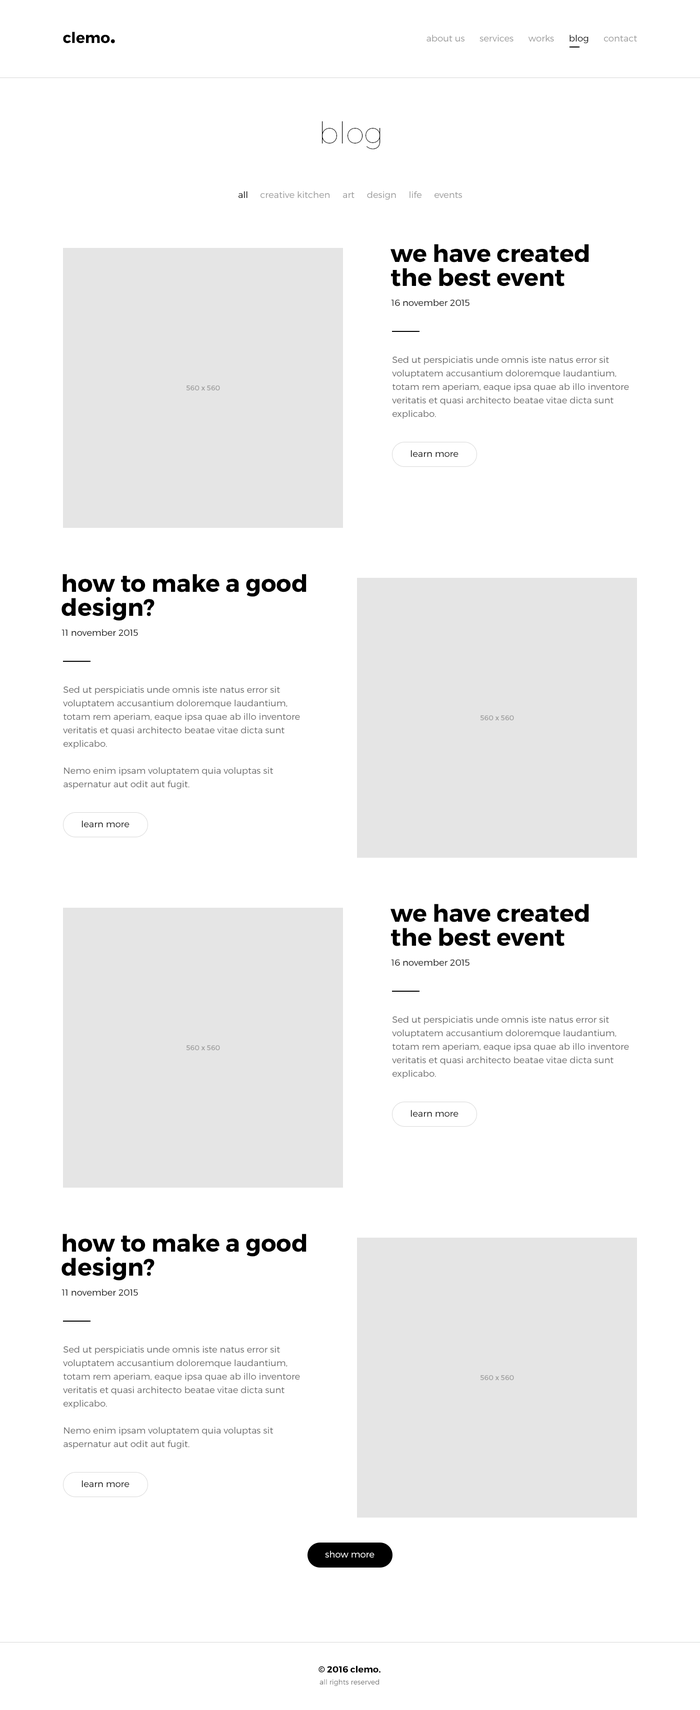
<style>
.page{position:relative;width:700px;height:1710px;background:#ffffff}
.page>*{position:absolute;margin:0}
.t1{font:15px "Montserrat-Bold";color:#000000}
.t2{font:24px "Montserrat-Bold";color:#000000}
.t3{font:9px "Montserrat-Light";color:#989898}
.t4{font:9px "Montserrat-Light";color:#000000}
.t5{font:30px "Montserrat-Hairline";color:#000000}
.t6{font:24px/24px "Montserrat-Bold";color:#000000}
.t7{font:9px/13.5px "Montserrat-Light";color:#656565}
.t8{font:7px "Montserrat-Regular";color:#9a9a9a}
.t9{font:9px "Montserrat-Light";color:#ffffff}
.t10{font:7px/12px "Montserrat-Light";color:#656565}
.t11{font:9px/12px "Montserrat-Bold";color:#000000}
</style>
<div class="page">
<p class="t1" style="left:63px;top:32px;width:52px;height:12px">clemo<span class="t2">.</span></p>
<p class="t3" style="left:426px;top:34px;width:211px;height:10px">about us      services      works      <span class="t4">blog</span>      contact</p>
<p class="t5" style="left:322px;top:121px;width:58px;height:29px">blog</p>
<p class="t3" style="left:238px;top:191px;width:224px;height:9px"><span class="t4">all </span>    creative kitchen     art     design     life     events</p>
<p class="t6" style="left:390px;top:244px;width:199px;height:42px">we have created <br>the best event</p>
<p class="t4" style="left:391px;top:299px;width:79px;height:7px">16 november 2015</p>
<p class="t7" style="left:392px;top:356px;width:237px;height:63px">Sed ut perspiciatis unde omnis iste natus error sit voluptatem accusantium doloremque laudantium, totam rem aperiam, eaque ipsa quae ab illo inventore veritatis et quasi architecto beatae vitae dicta sunt explicabo.</p>
<p class="t8" style="left:186px;top:386px;width:34px;height:4px">560 x 560</p>
<p class="t4" style="left:411px;top:450px;width:47px;height:7px">learn more</p>
<p class="t6" style="left:62px;top:574px;width:244px;height:47px">how to make a good <br>design?</p>
<p class="t4" style="left:62px;top:629px;width:76px;height:7px">11 november 2015</p>
<p class="t7" style="left:63px;top:686px;width:237px;height:104px">Sed ut perspiciatis unde omnis iste natus error sit voluptatem accusantium doloremque laudantium, totam rem aperiam, eaque ipsa quae ab illo inventore veritatis et quasi architecto beatae vitae dicta sunt explicabo. <br><br>Nemo enim ipsam voluptatem quia voluptas sit aspernatur aut odit aut fugit.</p>
<p class="t8" style="left:480px;top:716px;width:34px;height:4px">560 x 560</p>
<p class="t4" style="left:82px;top:820px;width:48px;height:8px">learn more</p>
<p class="t6" style="left:390px;top:904px;width:199px;height:42px">we have created <br>the best event</p>
<p class="t4" style="left:391px;top:959px;width:79px;height:7px">16 november 2015</p>
<p class="t7" style="left:392px;top:1016px;width:237px;height:63px">Sed ut perspiciatis unde omnis iste natus error sit voluptatem accusantium doloremque laudantium, totam rem aperiam, eaque ipsa quae ab illo inventore veritatis et quasi architecto beatae vitae dicta sunt explicabo.</p>
<p class="t8" style="left:186px;top:1046px;width:34px;height:4px">560 x 560</p>
<p class="t4" style="left:411px;top:1110px;width:47px;height:7px">learn more</p>
<p class="t6" style="left:62px;top:1234px;width:244px;height:47px">how to make a good <br>design?</p>
<p class="t4" style="left:62px;top:1289px;width:76px;height:7px">11 november 2015</p>
<p class="t7" style="left:63px;top:1346px;width:237px;height:104px">Sed ut perspiciatis unde omnis iste natus error sit voluptatem accusantium doloremque laudantium, totam rem aperiam, eaque ipsa quae ab illo inventore veritatis et quasi architecto beatae vitae dicta sunt explicabo. <br><br>Nemo enim ipsam voluptatem quia voluptas sit aspernatur aut odit aut fugit.</p>
<p class="t8" style="left:480px;top:1376px;width:34px;height:4px">560 x 560</p>
<p class="t4" style="left:82px;top:1480px;width:48px;height:8px">learn more</p>
<p class="t9" style="left:325px;top:1551px;width:49px;height:7px">show more</p>
<p class="t10" style="left:318px;top:1666px;width:62px;height:20px;text-align:center"><span class="t11">© 2016 clemo.<br></span>all rights reserved</p>
</div>
